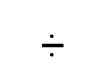
<style>
.page{position:relative;width:105px;height:83px;background:#ffffff}
.page>*{position:absolute;margin:0}
.t1{font:47.9px "DroidSans";color:#000000}
</style>
<div class="page">
<p class="t1" style="left:42px;top:34px;width:22px;height:23px">÷</p>
</div>
